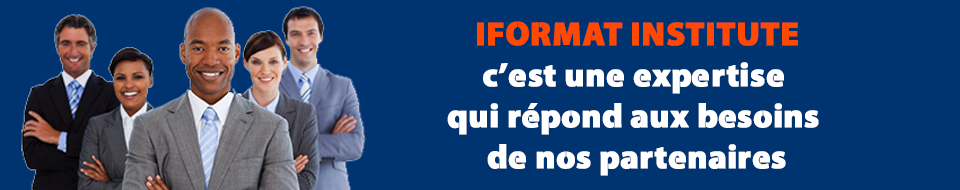
<style>
.page{position:relative;width:960px;height:190px;background:#003471}
.page>*{position:absolute;margin:0}
.t1{font:33.3px/40.9px "Cleanvertising-Black";color:#ffffff;font-weight:bold}
.t2{font:33.3px/40.9px "Cleanvertising-Black";color:#ff4800;font-weight:bold}
</style>
<div class="page">
<p class="t1" style="left:447px;top:21px;width:372px;height:155px;text-align:center"><span class="t2">IFORMAT INSTITUTE<br></span>c’est une expertise <br>qui répond aux besoins <br>de nos partenaires</p>
</div>
